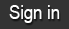
<style>
.page{position:relative;width:69px;height:29px;background:#333333}
.page>*{position:absolute;margin:0}
.t1{font:19.4px "ArialMT";color:#ffffff;scale:0.86 1}
</style>
<div class="page">
<p class="t1" style="left:9px;top:5px;width:51px;height:18px">Sign in</p>
</div>
